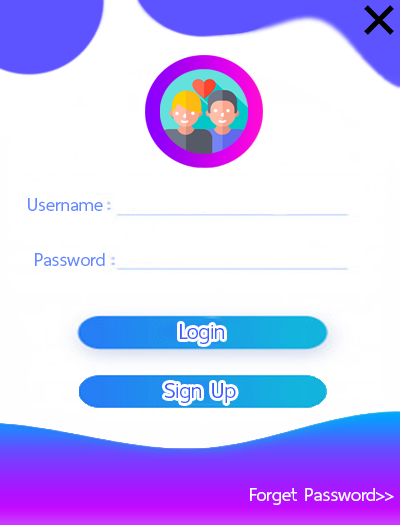
<style>
.page{position:relative;width:400px;height:525px;background:#ffffff}
.page>*{position:absolute;margin:0}
.t1{font:25px "ThaiSansNeue-Regular";color:#6289fd}
.t2{font:29.2px "ThaiSansNeue-Regular";color:#365dfd}
.t3{font:29.2px "ThaiSansNeue-Regular";color:#375efd}
.t4{font:25px "ThaiSansNeue-Regular";color:#ffffff}
</style>
<div class="page">
<p class="t1" style="left:28px;top:198px;width:75px;height:13px">Username</p>
<p class="t1" style="left:35px;top:253px;width:70px;height:13px">Password</p>
<p class="t2" style="left:180px;top:324px;width:44px;height:20px">Login</p>
<p class="t3" style="left:165px;top:383px;width:71px;height:20px">Sign Up</p>
<p class="t4" style="left:250px;top:488px;width:144px;height:17px">Forget Password&gt;&gt;</p>
</div>
